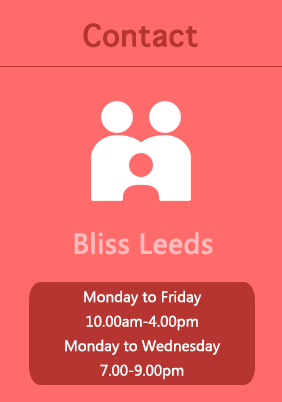
<style>
.page{position:relative;width:282px;height:402px;background:#ff6b6b}
.page>*{position:absolute;margin:0}
.t1{font:40px "AppleSymbols";color:#b73531;font-weight:bold}
.t2{font:26px "MicrosoftYaHei";color:#febbbd;font-weight:bold}
.t3{font:14px "MicrosoftYaHei";color:#ffffff}
</style>
<div class="page">
<p class="t1" style="left:83px;top:23px;width:115px;height:25px">Contact</p>
<p class="t2" style="left:74px;top:232px;width:139px;height:23px">Bliss Leeds</p>
<p class="t3" style="left:65px;top:290px;width:156px;height:90px;text-align:center">Monday to Friday <br>10.00am-4.00pm<br>Monday to Wednesday <br>7.00-9.00pm</p>
</div>
